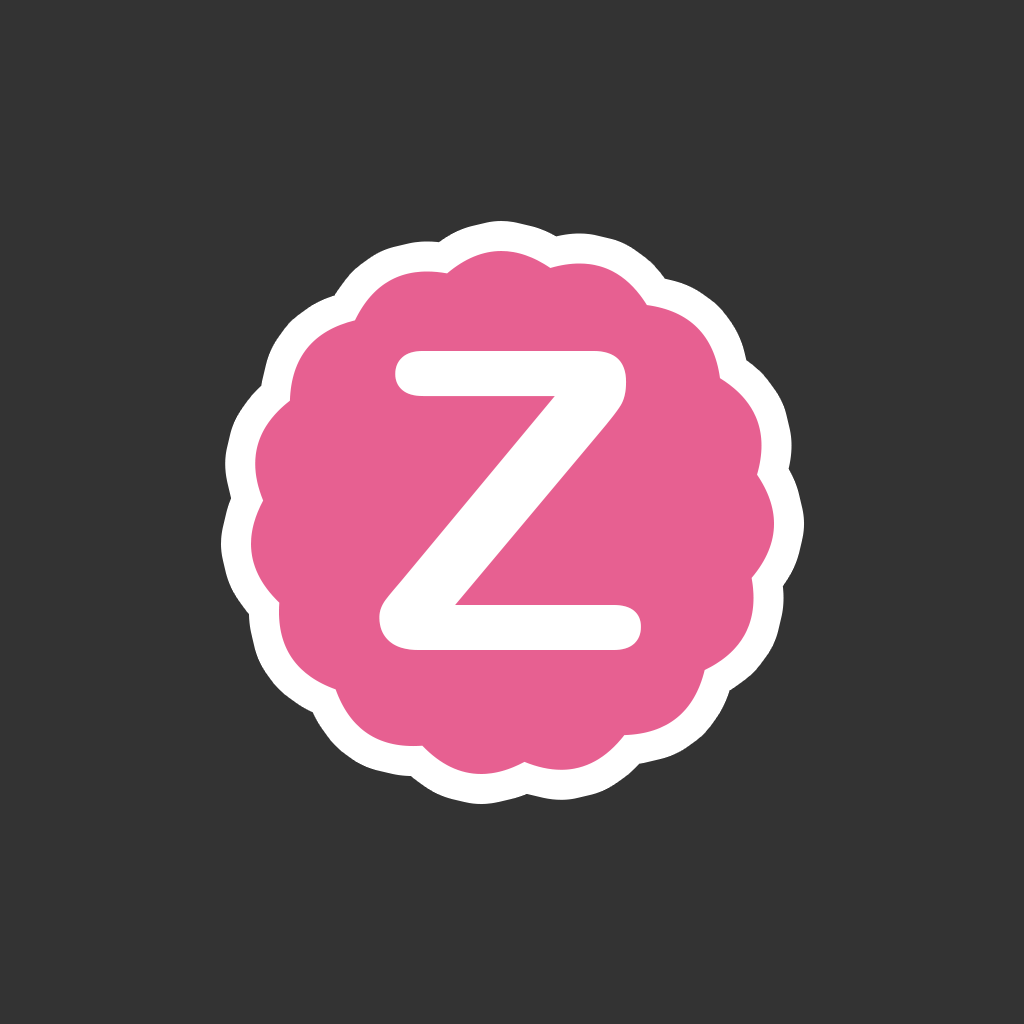
<style>
.page{position:relative;width:1024px;height:1024px;background:#333333}
.page>*{position:absolute;margin:0}
.t1{font:416.7px "ArialRoundedMTBold";color:#ffffff}
</style>
<div class="page">
<p class="t1" style="left:379px;top:351px;width:262px;height:299px">Z</p>
</div>
